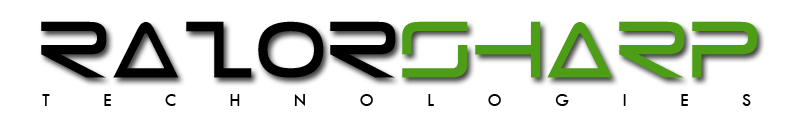
<style>
.page{position:relative;width:800px;height:120px;background:#ffffff}
.page>*{position:absolute;margin:0}
.t1{font:72px "Tele-Marines";color:#000000}
.t2{font:72px "Tele-Marines";color:#4d9d17}
.t3{font:18px "TwCenMT-Regular";letter-spacing:2.98em;color:#000000}
</style>
<div class="page">
<p class="t1" style="left:41px;top:21px;width:717px;height:57px">Razor<span class="t2">Sharp</span></p>
<p class="t3" style="left:42px;top:94px;width:709px;height:12px">TECHNOLOGIES</p>
</div>
